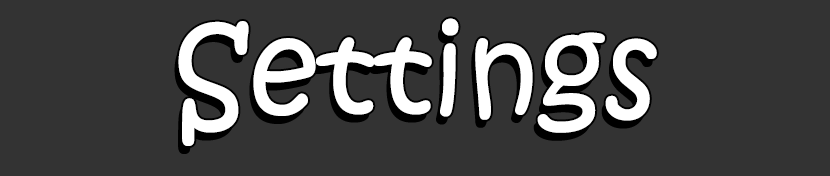
<style>
.page{position:relative;width:830px;height:176px;background:#333333}
.page>*{position:absolute;margin:0}
.t1{font:124.4px "KristenITC-Regular";color:#ffffff}
</style>
<div class="page">
<p class="t1" style="left:178px;top:18px;width:479px;height:128px">Settings</p>
</div>
